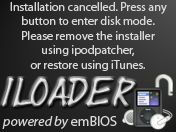
<style>
.page{position:relative;width:176px;height:132px}
.page>*{position:absolute;margin:0}
.t1{font:12px "MyriadPro-Regular";color:#d8d8d8}
.t2{font:30px "Yearsupplyoffairycakes"}
.t3{font:14px "MyriadPro-It";color:#d8d8d8}
.t4{font:14px "MyriadPro-Regular";color:#d8d8d8}
</style>
<div class="page">
<p class="t1" style="left:10px;top:2px;width:157px;height:69px;text-align:center">Installation cancelled. Press any<br>button to enter disk mode.<br>Please remove the installer<br>using ipodpatcher,<br>or restore using iTunes.</p>
<p class="t2" style="left:2px;top:78px;width:134px;height:29px">iLoader</p>
<p class="t3" style="left:2px;top:116px;width:115px;height:13px">powered by<span class="t4"> emBIOS</span></p>
</div>
